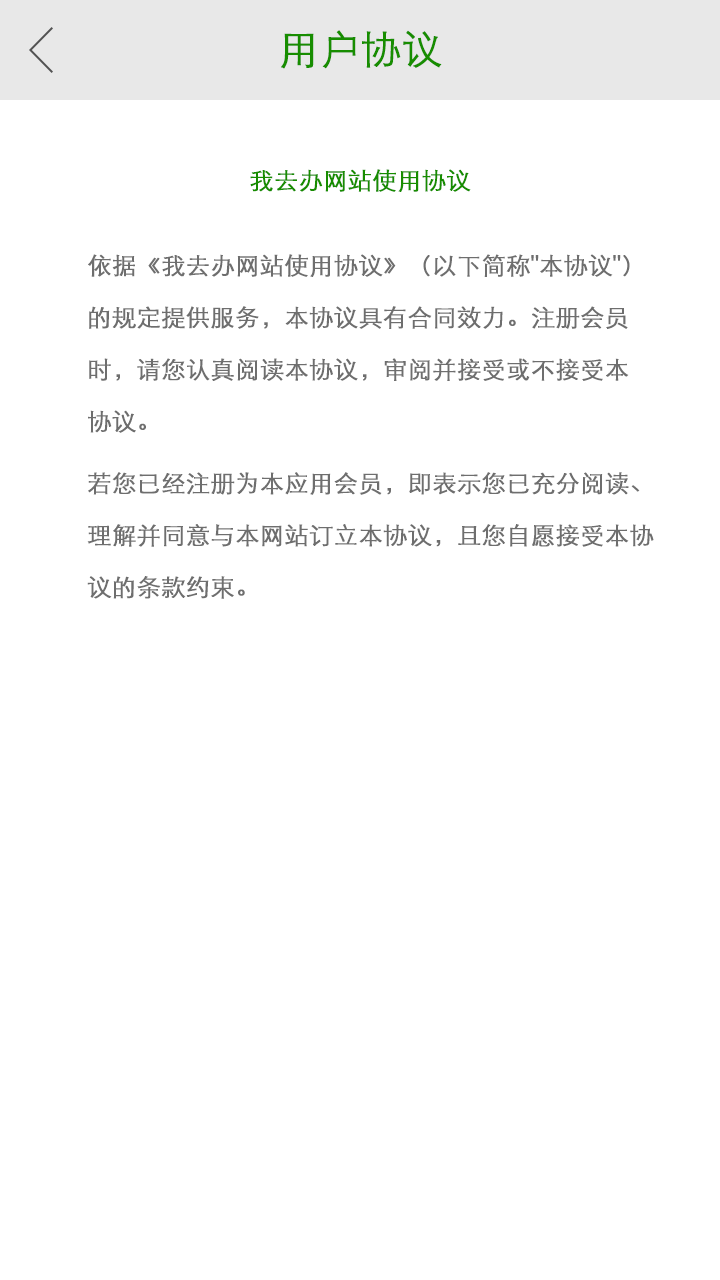
<style>
.page{position:relative;width:720px;height:1280px;background:#ffffff}
.page>*{position:absolute;margin:0}
.t1{font:40px "STXihei";color:#178d00;font-weight:bold}
.t2{font:24px "STXihei";color:#178d00;font-weight:bold}
.t3{font:24px/52px "STXihei";color:#6e6e6e;font-weight:bold}
.t4{font:24px/22px "STXihei";color:#6e6e6e;font-weight:bold}
</style>
<div class="page">
<p class="t1" style="left:281px;top:30px;width:161px;height:39px">用户协议</p>
<p class="t2" style="left:250px;top:169px;width:221px;height:23px">我去办网站使用协议</p>
<p class="t3" style="left:88px;top:254px;width:542px;height:179px;text-align:justify"><span class="t4"><br></span>依据《我去办网站使用协议》（以下简称"本协议"）<br>的规定提供服务，本协议具有合同效力。注册会员<br>时，请您认真阅读本协议，审阅并接受或不接受本<br>协议。</p>
<p class="t3" style="left:87px;top:472px;width:567px;height:127px;text-align:justify">若您已经注册为本应用会员，即表示您已充分阅读、<br>理解并同意与本网站订立本协议，且您自愿接受本协<br>议的条款约束。</p>
</div>
